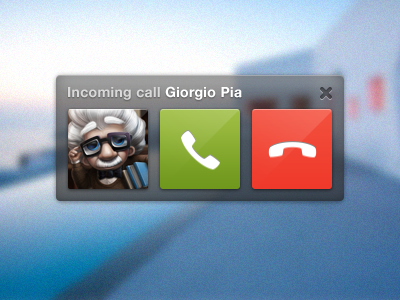
<style>
.page{position:relative;width:400px;height:300px}
.page>*{position:absolute;margin:0}
.t1{font:14px "HelveticaNeue-Bold";letter-spacing:0.025em;color:#d9d9d9}
.t2{font:14px "HelveticaNeue-Bold";letter-spacing:0.025em;color:#ffffff}
</style>
<div class="page">
<p class="t1" style="left:68px;top:86px;width:174px;height:14px">Incoming call<span class="t2"> Giorgio Pia</span></p>
</div>
